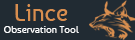
<style>
.page{position:relative;width:135px;height:40px;background:#212b33}
.page>*{position:absolute;margin:0}
.t1{font:24px "Baumans-Regular";color:#d88e4f}
.t2{font:10px "Baumans-Regular";color:#fdfeff}
</style>
<div class="page">
<p class="t1" style="left:15px;top:4px;width:53px;height:17px">Lince</p>
<p class="t2" style="left:4px;top:26px;width:75px;height:7px">Observation Tool</p>
</div>
